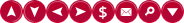
<style>
.page{position:relative;width:184px;height:23px;background:#ffffff}
.page>*{position:absolute;margin:0}
.t1{font:16px "OpenSans-Semibold";color:#ffffff}
</style>
<div class="page">
<p class="t1" style="left:99px;top:6px;width:8px;height:13px">$</p>
</div>
